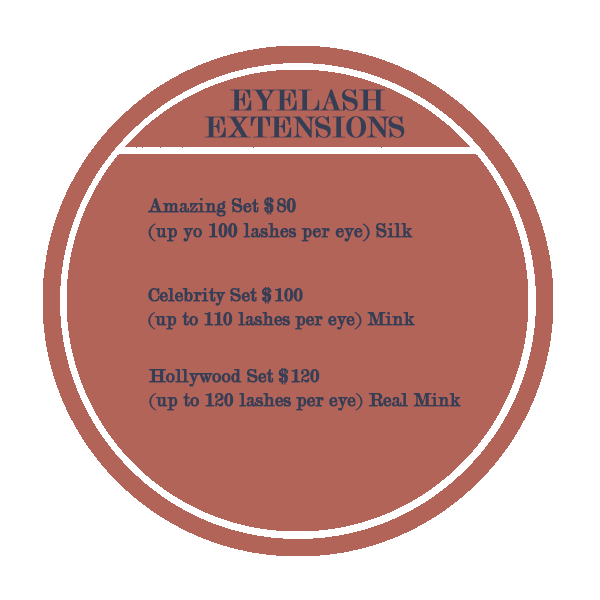
<style>
.page{position:relative;width:600px;height:600px;background:#b36458}
.page>*{position:absolute;margin:0}
.t1{font:31.9px/27.1px "Modern-Regular";color:#353e55;font-weight:bold}
.t2{font:20.7px "Modern-Regular";color:#353e55;font-weight:bold}
.t3{font:20px "Modern-Regular";color:#353e55;font-weight:bold}
</style>
<div class="page">
<p class="t1" style="left:204px;top:89px;width:201px;height:49px">EYELASH<br>EXTENSIONS</p>
<p class="t2" style="left:147px;top:197px;width:266px;height:45px">Amazing Set $80<br>(up yo 100 lashes per eye) Silk</p>
<p class="t3" style="left:148px;top:287px;width:267px;height:43px">Celebrity Set $100<br>(up to 110 lashes per eye) Mink</p>
<p class="t3" style="left:149px;top:368px;width:312px;height:43px">Hollywood Set $120<br>(up to 120 lashes per eye) Real Mink</p>
</div>
